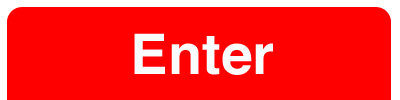
<style>
.page{position:relative;width:400px;height:100px;background:#ff0000}
.page>*{position:absolute;margin:0}
.t1{font:56px "Helvetica-Bold";color:#f9fbfd}
</style>
<div class="page">
<p class="t1" style="left:134px;top:33px;width:139px;height:42px">Enter</p>
</div>
